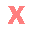
<style>
.page{position:relative;width:32px;height:32px;background:#ffffff}
.page>*{position:absolute;margin:0}
.t1{font:27px "AppleSDGothicNeoH00";color:#ff7f7f}
</style>
<div class="page">
<p class="t1" style="left:8px;top:6px;width:17px;height:18px">X</p>
</div>
